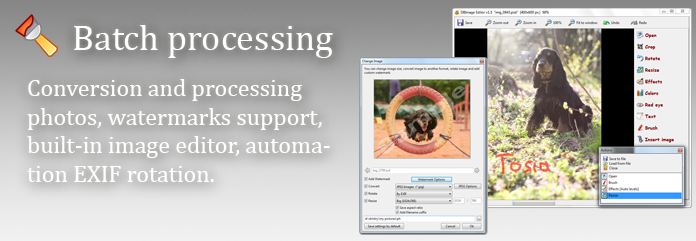
<style>
.page{position:relative;width:696px;height:241px}
.page>*{position:absolute;margin:0}
.t1{font:36px "CambriaMath";color:#ffffff}
.t2{font:24px "CambriaMath";color:#ffffff}
</style>
<div class="page">
<p class="t1" style="left:74px;top:25px;width:259px;height:33px">Batch processing</p>
<p class="t2" style="left:27px;top:79px;width:303px;height:103px">Conversion and processing photos, watermarks support, built-in image editor, automation EXIF rotation.</p>
</div>
